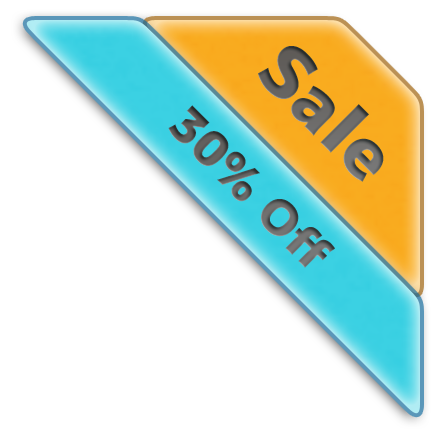
<style>
.page{position:relative;width:440px;height:440px;background:#ffffff}
.page>*{position:absolute;margin:0}
.t1{font:72px "mplus-1p-black";color:#666462}
.t2{font:48px "mplus-1p-black"}
</style>
<div class="page">
<p class="t1" style="left:258px;top:46px;width:126px;height:136px;rotate:45deg">Sale</p>
<p class="t2" style="left:168px;top:105px;width:167px;height:163px;rotate:45deg">30% Off</p>
</div>
